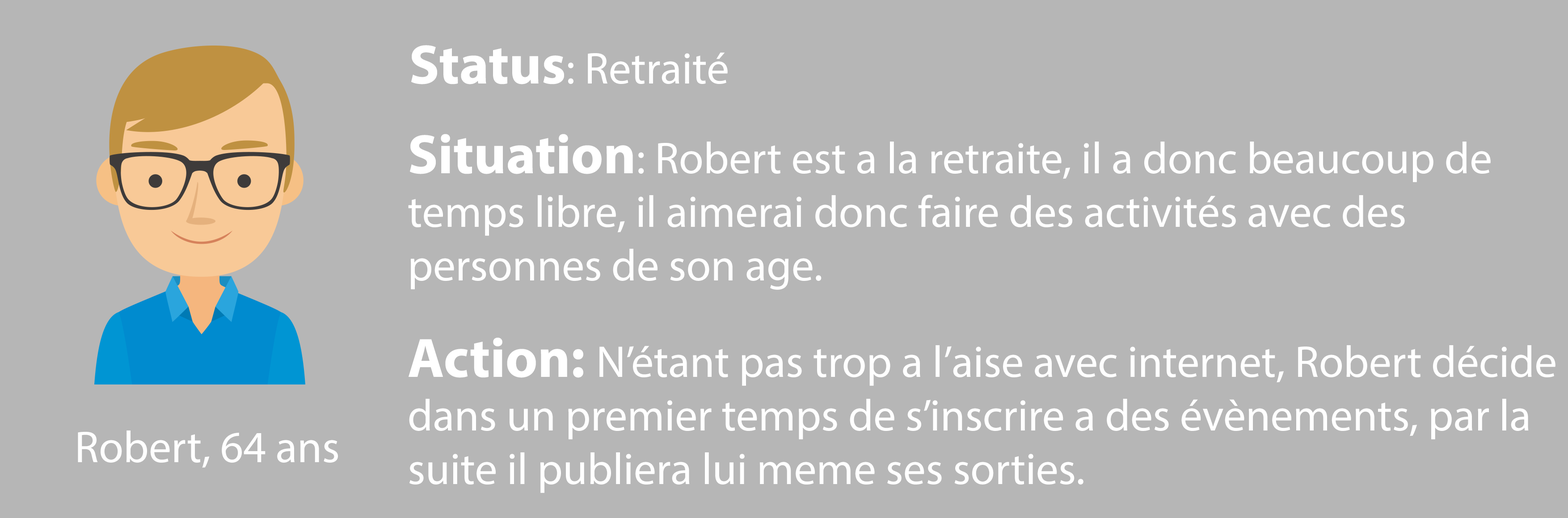
<style>
.page{position:relative;width:1568px;height:518px;background:#b6b6b6}
.page>*{position:absolute;margin:0}
.t1{font:44.7px "MyriadPro-Regular";color:#ffffff}
.t2{font:55.9px "MyriadPro-Bold";color:#ffffff}
</style>
<div class="page">
<p class="t1" style="left:411px;top:45px;width:317px;height:39px"><span class="t2">Status</span>: Retraité</p>
<p class="t1" style="left:408px;top:134px;width:1083px;height:156px"><span class="t2">Situation</span>: Robert est a la retraite, il a donc beaucoup de <br>temps libre, il aimerai donc faire des activités avec des <br>personnes de son age.</p>
<p class="t1" style="left:409px;top:338px;width:1146px;height:155px"><span class="t2">Action: </span>N’étant pas trop a l’aise avec internet, Robert décide<br>dans un premier temps de s’inscrire a des évènements, par la <br>suite il publiera lui meme ses sorties.</p>
<p class="t1" style="left:78px;top:431px;width:260px;height:37px">Robert, 64 ans</p>
</div>
